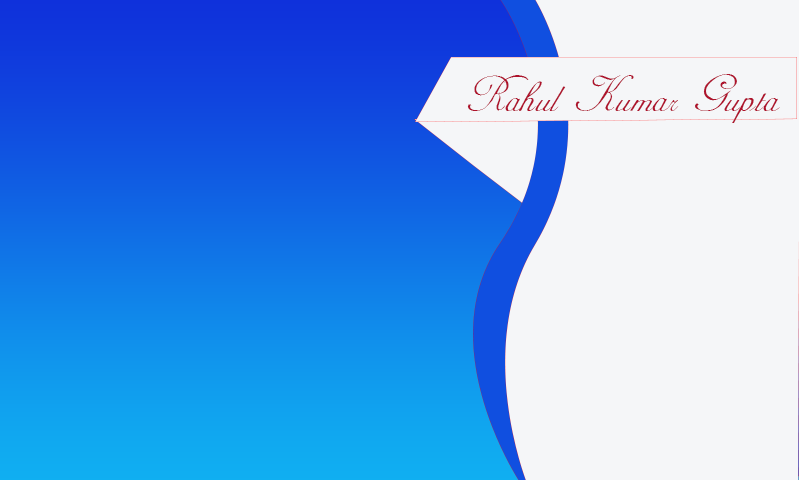
<style>
.page{position:relative;width:799px;height:480px;background:#f5f6f8}
.page>*{position:absolute;margin:0}
.t1{font:58.3px "AdineKirnberg-Script";color:#ae122c}
</style>
<div class="page">
<p class="t1" style="left:467px;top:74px;width:313px;height:49px">Rahul Kumar Gupta</p>
</div>
